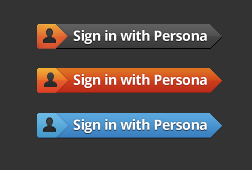
<style>
.page{position:relative;width:252px;height:170px;background:#333333}
.page>*{position:absolute;margin:0}
.t1{font:14px "OpenSans-Bold";letter-spacing:-0.025em;color:#ffffff}
</style>
<div class="page">
<p class="t1" style="left:73px;top:30px;width:134px;height:14px">Sign in with Persona</p>
<p class="t1" style="left:73px;top:74px;width:134px;height:14px">Sign in with Persona</p>
<p class="t1" style="left:73px;top:119px;width:134px;height:14px">Sign in with Persona</p>
</div>
